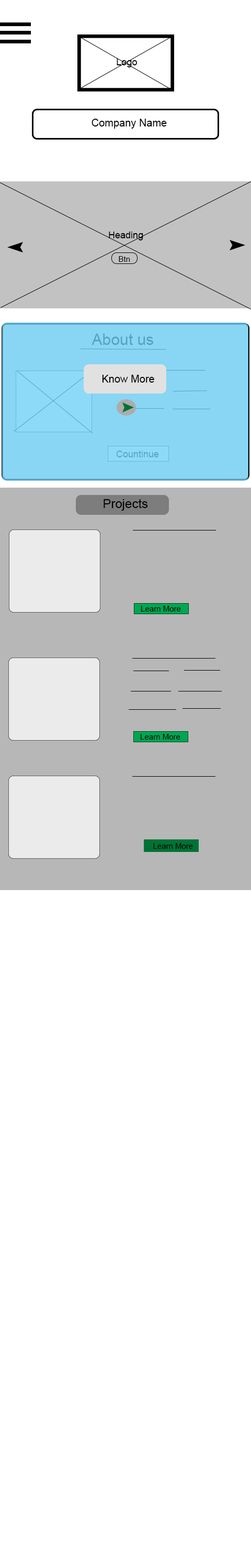
<style>
.page{position:relative;width:251px;height:1568px;background:#ffffff}
.page>*{position:absolute;margin:0}
.t1{font:9.4px "ArialMT";color:#000000}
.t2{font:10.5px "ArialMT";color:#000000}
.t3{font:7.8px "ArialMT";color:#000000}
.t4{font:15.7px "ArialMT";color:#55a2c0}
.t5{font:9.4px "ArialMT";color:#55a2c0}
.t6{font:12.5px "ArialMT";color:#000000}
</style>
<div class="page">
<p class="t1" style="left:117px;top:59px;width:20px;height:8px">Logo</p>
<p class="t2" style="left:91px;top:119px;width:76px;height:10px">Company Name</p>
<p class="t1" style="left:109px;top:232px;width:34px;height:8px">Heading</p>
<p class="t3" style="left:119px;top:256px;width:11px;height:6px">Btn</p>
<p class="t4" style="left:91px;top:333px;width:62px;height:12px">About us</p>
<p class="t2" style="left:102px;top:375px;width:52px;height:8px">Know More</p>
<p class="t5" style="left:116px;top:451px;width:43px;height:6px">Countinue</p>
<p class="t6" style="left:103px;top:499px;width:45px;height:12px">Projects</p>
<p class="t3" style="left:141px;top:606px;width:40px;height:6px">Learn More</p>
<p class="t3" style="left:141px;top:734px;width:39px;height:6px">Learn More</p>
<p class="t3" style="left:153px;top:843px;width:40px;height:6px">Learn More</p>
</div>
